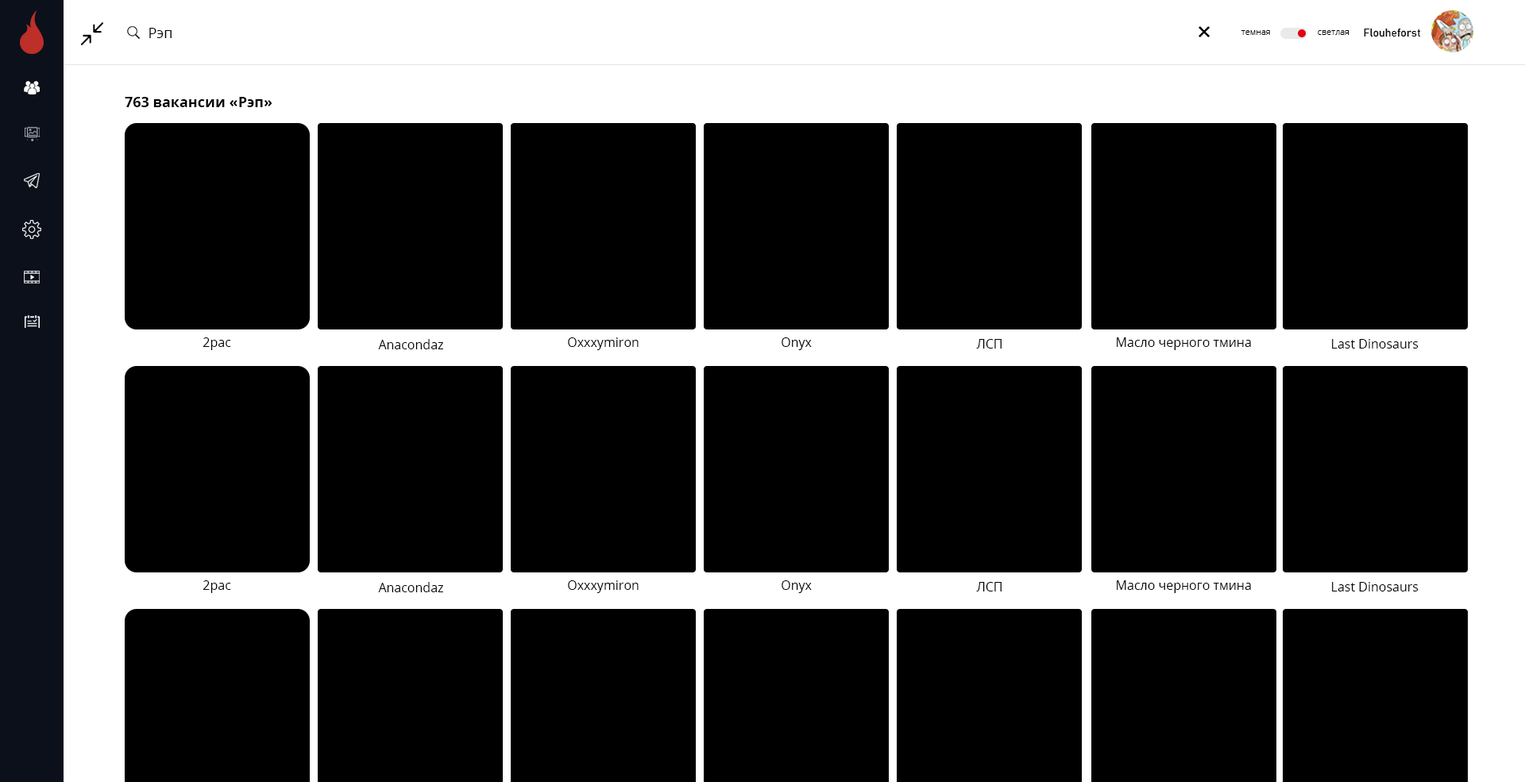
<style>
.page{position:relative;width:1525px;height:782px;background:#000000}
.page>*{position:absolute;margin:0}
.t1{font:14.3px "OpenSans";color:#000000}
.t2{font:11.1px "Bahnschrift";color:#000000}
.t3{font:8.7px "OpenSans-Light";color:#000000}
.t4{font:14.3px "OpenSans-Bold";color:#000000}
.t5{font:12.7px "OpenSans";color:#000000}
</style>
<div class="page">
<p class="t1" style="left:149px;top:28px;width:23px;height:10px">Рэп</p>
<p class="t2" style="left:1363px;top:28px;width:58px;height:9px">Flouheforst</p>
<p class="t3" style="left:1240px;top:30px;width:30px;height:5px">темная</p>
<p class="t3" style="left:1317px;top:30px;width:31px;height:5px">светлая</p>
<p class="t4" style="left:125px;top:97px;width:147px;height:10px">763 вакансии «Рэп»</p>
<p class="t5" style="left:202px;top:337px;width:29px;height:13px">2pac</p>
<p class="t5" style="left:378px;top:339px;width:65px;height:10px">Anacondaz</p>
<p class="t5" style="left:568px;top:337px;width:70px;height:13px">Oxxxymiron</p>
<p class="t5" style="left:781px;top:337px;width:31px;height:13px">Onyx</p>
<p class="t5" style="left:976px;top:339px;width:25px;height:10px">ЛСП</p>
<p class="t5" style="left:1116px;top:337px;width:135px;height:13px">Масло черного тмина</p>
<p class="t5" style="left:1332px;top:339px;width:86px;height:10px">Last Dinosaurs</p>
<p class="t5" style="left:202px;top:580px;width:29px;height:13px">2pac</p>
<p class="t5" style="left:568px;top:580px;width:70px;height:13px">Oxxxymiron</p>
<p class="t5" style="left:781px;top:580px;width:31px;height:13px">Onyx</p>
<p class="t5" style="left:1116px;top:580px;width:135px;height:13px">Масло черного тмина</p>
<p class="t5" style="left:378px;top:582px;width:65px;height:10px">Anacondaz</p>
<p class="t5" style="left:976px;top:582px;width:25px;height:10px">ЛСП</p>
<p class="t5" style="left:1332px;top:582px;width:86px;height:10px">Last Dinosaurs</p>
</div>
